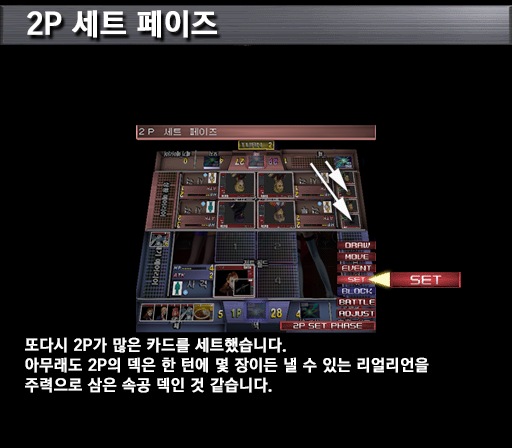
<style>
.page{position:relative;width:512px;height:448px;background:#000000}
.page>*{position:absolute;margin:0}
.t1{font:30px "KoreanGD15-R";color:#ffffff;font-weight:bold}
.t2{font:16px/20px "KoreanGD15-R";color:#ffffff;font-weight:bold}
</style>
<div class="page">
<p class="t1" style="left:27px;top:10px;width:190px;height:28px">2P 세트 페이즈</p>
<p class="t2" style="left:25px;top:337px;width:404px;height:56px">또다시 2P가 많은 카드를 세트했습니다.<br>아무래도 2P의 덱은 한 턴에 몇 장이든 낼 수 있는 리얼리언을<br>주력으로 삼은 속공 덱인 것 같습니다.</p>
</div>
